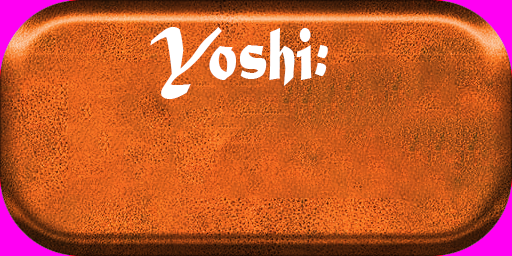
<style>
.page{position:relative;width:512px;height:256px}
.page>*{position:absolute;margin:0}
.t1{font:79.2px "MaturaMTScriptCapitals";color:#ffffff;scale:0.74 1}
</style>
<div class="page">
<p class="t1" style="left:150px;top:27px;width:178px;height:72px">Yoshi:</p>
</div>
